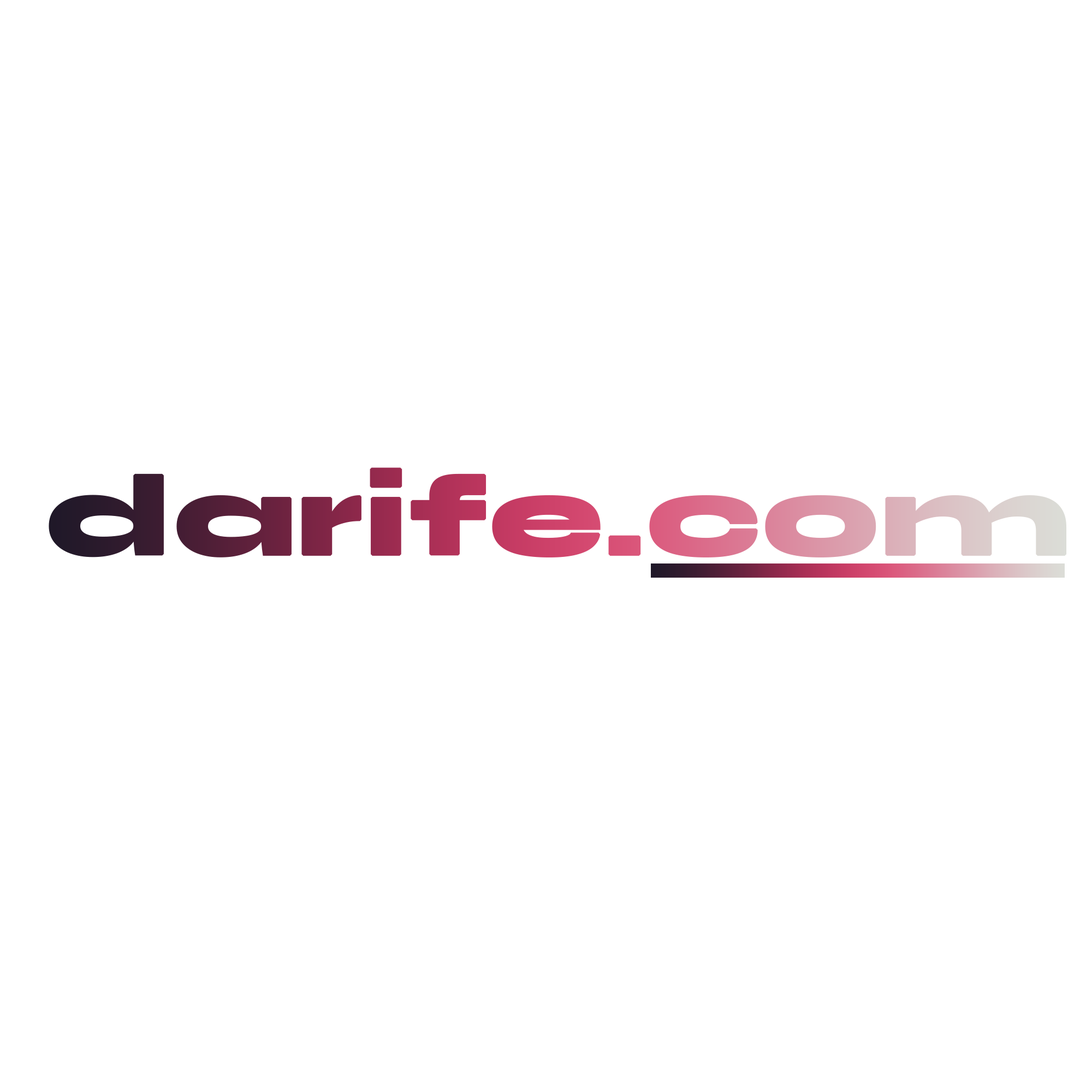
<style>
.page{position:relative;width:1092px;height:1092px;background:#ffffff}
.page>*{position:absolute;margin:0}
.t1{font:113.7px "Syne-ExtraBold";font-weight:bold}
</style>
<div class="page">
<p class="t1" style="left:49px;top:467px;width:1018px;height:90px">darife.com</p>
</div>
